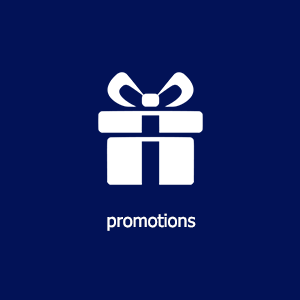
<style>
.page{position:relative;width:300px;height:300px;background:#021257}
.page>*{position:absolute;margin:0}
.t1{font:18px "Tahoma";color:#ffffff}
</style>
<div class="page">
<p class="t1" style="left:107px;top:213px;width:89px;height:18px">promotions</p>
</div>
